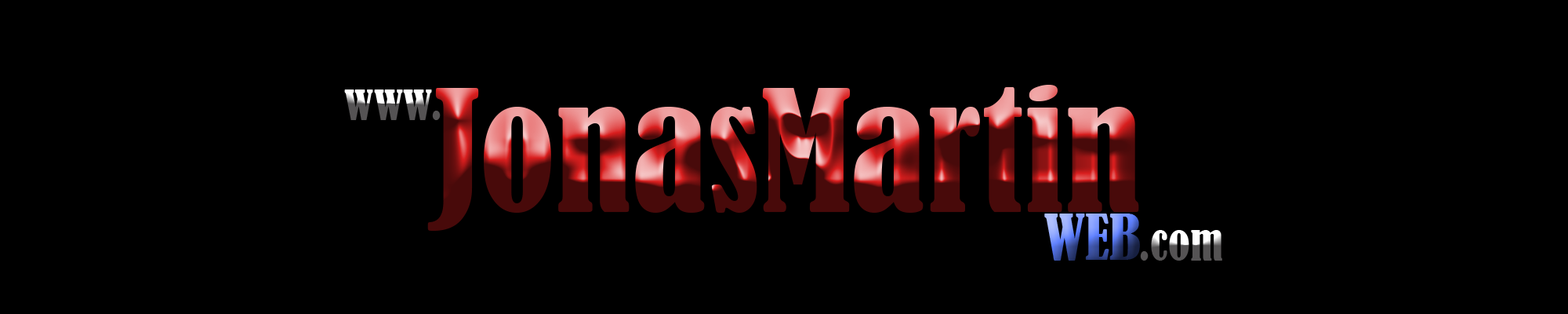
<style>
.page{position:relative;width:1568px;height:314px;background:#000000}
.page>*{position:absolute;margin:0}
.t1{font:45.7px "BernardMT-Condensed"}
.t2{font:156.8px "BernardMT-Condensed"}
.t3{font:58.8px "BernardMT-Condensed"}
</style>
<div class="page">
<p class="t1" style="left:344px;top:89px;width:97px;height:31px">www.</p>
<p class="t2" style="left:427px;top:85px;width:712px;height:145px">JonasMartin</p>
<p class="t3" style="left:1044px;top:213px;width:96px;height:47px">WEB</p>
<p class="t1" style="left:1140px;top:230px;width:82px;height:30px">.com</p>
</div>
